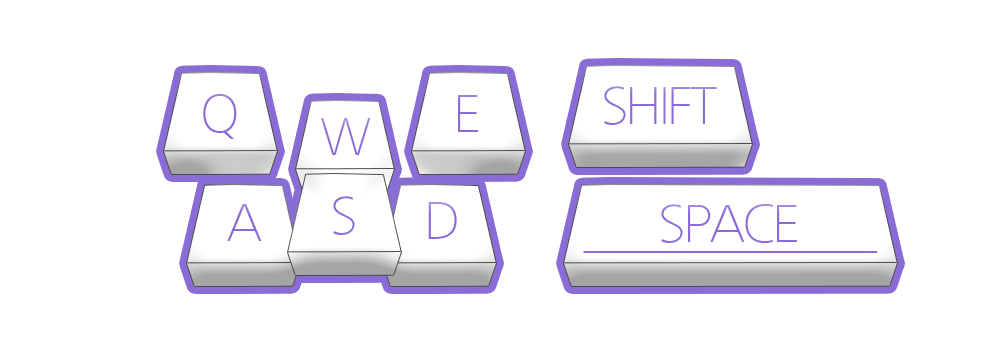
<style>
.page{position:relative;width:1005px;height:364px;background:#ffffff}
.page>*{position:absolute;margin:0}
.t1{font:50px "NanumGothicLight";letter-spacing:-0.06em;color:#8a6cd7}
.t2{font:50px "NanumGothicLight";letter-spacing:-0.06em;color:#8b6dd8}
.t3{font:50px "NanumGothicLight";letter-spacing:-0.06em}
</style>
<div class="page">
<p class="t1" style="left:604px;top:86px;width:113px;height:39px">SHIFT</p>
<p class="t1" style="left:203px;top:94px;width:34px;height:45px">Q</p>
<p class="t1" style="left:458px;top:95px;width:20px;height:37px">E</p>
<p class="t2" style="left:321px;top:118px;width:50px;height:37px">W</p>
<p class="t1" style="left:333px;top:196px;width:22px;height:39px">S</p>
<p class="t1" style="left:227px;top:204px;width:34px;height:37px">A</p>
<p class="t3" style="left:428px;top:202px;width:29px;height:37px">D</p>
<p class="t1" style="left:661px;top:204px;width:136px;height:39px">SPACE</p>
<p class="t1" style="left:583px;top:251px;width:295px;height:2px">____________</p>
</div>
